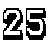
<style>
.page{position:relative;width:48px;height:48px;background:#ffffff}
.page>*{position:absolute;margin:0}
.t1{font:36px "KarmaFuture-Regular";color:#010101}
</style>
<div class="page">
<p class="t1" style="left:3px;top:8px;width:43px;height:32px">25</p>
</div>
